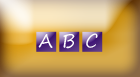
<style>
.page{position:relative;width:140px;height:77px}
.page>*{position:absolute;margin:0}
.t1{font:17.9px "SegoePrint";color:#ffffff}
</style>
<div class="page">
<p class="t1" style="left:38px;top:34px;width:15px;height:14px">A</p>
<p class="t1" style="left:63px;top:34px;width:12px;height:15px">B</p>
<p class="t1" style="left:86px;top:33px;width:12px;height:15px">C</p>
</div>
